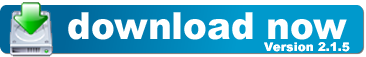
<style>
.page{position:relative;width:366px;height:57px;background:#ffffff}
.page>*{position:absolute;margin:0}
.t1{font:37.5px "Arial-Black";color:#ffffff;scale:0.95 1}
.t2{font:12px "Arial-Black";color:#ffffff}
</style>
<div class="page">
<p class="t1" style="left:68px;top:12px;width:279px;height:28px">download now</p>
<p class="t2" style="left:264px;top:42px;width:86px;height:10px">Version 2.1.5</p>
</div>
